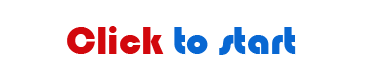
<style>
.page{position:relative;width:368px;height:78px;background:#ffffff}
.page>*{position:absolute;margin:0}
.t1{font:40px "Bauhaus93";color:#0867d2}
.t2{font:40px "Bauhaus93";color:#d2080d}
</style>
<div class="page">
<p class="t1" style="left:67px;top:26px;width:229px;height:29px"><span class="t2">Click </span>to start</p>
</div>
